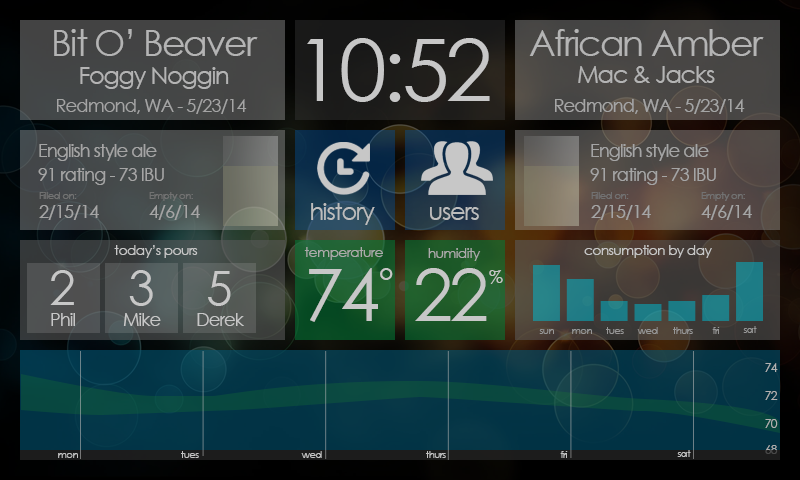
<style>
.page{position:relative;width:800px;height:480px}
.page>*{position:absolute;margin:0}
.t1{font:36px "CenturyGothic";letter-spacing:-0.05em;color:#bdbdbd}
.t2{font:86px "CenturyGothic";letter-spacing:-0.05em;color:#c7c7c7}
.t3{font:24px "CenturyGothic";letter-spacing:-0.05em;color:#bdbdbd}
.t4{font:18px "CenturyGothic";letter-spacing:-0.05em;color:#a4a4a4}
.t5{font:10px "CenturyGothic";letter-spacing:-0.05em;color:#727272}
.t6{font:14px "CenturyGothic";letter-spacing:-0.05em;color:#c7c7c7}
.t7{font:14px "CenturyGothic";letter-spacing:-0.05em;color:#ababab}
.t8{font:48px "CenturyGothic";letter-spacing:-0.05em;color:#c7c7c7}
.t9{font:72px "CenturyGothic";letter-spacing:-0.05em;color:#c7c7c7}
.t10{font:36px "CenturyGothic";letter-spacing:-0.05em;color:#c7c7c7}
.t11{font:18px "CenturyGothic";letter-spacing:-0.05em;color:#c7c7c7}
.t12{font:10px "CenturyGothic";letter-spacing:-0.05em;color:#969696}
.t13{font:12px "CenturyGothic";letter-spacing:-0.05em;color:#b1b1b1}
.t14{font:12px "CenturyGothic";letter-spacing:-0.05em}
.t15{font:10px "CenturyGothic";letter-spacing:-0.05em;color:#c3c3c3}
</style>
<div class="page">
<p class="t1" style="left:54px;top:29px;width:204px;height:27px">Bit O’ Beaver</p>
<p class="t1" style="left:529px;top:29px;width:235px;height:27px">African Amber</p>
<p class="t2" style="left:307px;top:38px;width:183px;height:64px">10:52</p>
<p class="t3" style="left:80px;top:67px;width:149px;height:22px">Foggy Noggin</p>
<p class="t3" style="left:578px;top:66px;width:137px;height:17px">Mac &amp; Jacks</p>
<p class="t4" style="left:57px;top:99px;width:190px;height:15px">Redmond, WA - 5/23/14</p>
<p class="t4" style="left:555px;top:99px;width:190px;height:15px">Redmond, WA - 5/23/14</p>
<p class="t4" style="left:39px;top:144px;width:118px;height:17px">English style ale</p>
<p class="t4" style="left:591px;top:144px;width:118px;height:17px">English style ale</p>
<p class="t4" style="left:38px;top:168px;width:126px;height:17px">91 rating - 73 IBU</p>
<p class="t4" style="left:590px;top:168px;width:126px;height:17px">91 rating - 73 IBU</p>
<p class="t5" style="left:39px;top:192px;width:38px;height:7px">Filled on:</p>
<p class="t5" style="left:149px;top:192px;width:44px;height:9px">Empty on:</p>
<p class="t5" style="left:591px;top:192px;width:38px;height:7px">Filled on:</p>
<p class="t5" style="left:701px;top:192px;width:44px;height:9px">Empty on:</p>
<p class="t4" style="left:39px;top:205px;width:60px;height:15px">2/15/14</p>
<p class="t4" style="left:149px;top:205px;width:51px;height:15px">4/6/14</p>
<p class="t3" style="left:311px;top:203px;width:64px;height:22px">history</p>
<p class="t3" style="left:430px;top:207px;width:49px;height:13px">users</p>
<p class="t4" style="left:591px;top:205px;width:60px;height:15px">2/15/14</p>
<p class="t4" style="left:701px;top:205px;width:51px;height:15px">4/6/14</p>
<p class="t6" style="left:114px;top:245px;width:84px;height:13px">today’s pours</p>
<p class="t6" style="left:584px;top:245px;width:128px;height:13px">consumption by day</p>
<p class="t7" style="left:304px;top:247px;width:79px;height:13px">temperature</p>
<p class="t7" style="left:428px;top:248px;width:53px;height:13px">humidity</p>
<p class="t8" style="left:50px;top:270px;width:24px;height:35px">2</p>
<p class="t8" style="left:129px;top:270px;width:24px;height:36px">3</p>
<p class="t9" style="left:309px;top:268px;width:69px;height:54px">74</p>
<p class="t10" style="left:380px;top:268px;width:13px;height:12px">°</p>
<p class="t9" style="left:415px;top:268px;width:72px;height:53px">22</p>
<p class="t11" style="left:489px;top:270px;width:14px;height:14px">%</p>
<p class="t8" style="left:208px;top:271px;width:23px;height:35px">5</p>
<p class="t11" style="left:51px;top:313px;width:24px;height:13px">Phil</p>
<p class="t11" style="left:123px;top:313px;width:38px;height:13px">Mike</p>
<p class="t11" style="left:197px;top:313px;width:47px;height:13px">Derek</p>
<p class="t12" style="left:539px;top:329px;width:15px;height:5px">sun</p>
<p class="t12" style="left:572px;top:329px;width:20px;height:5px">mon</p>
<p class="t12" style="left:606px;top:327px;width:18px;height:7px">tues</p>
<p class="t12" style="left:637px;top:327px;width:21px;height:7px">wed</p>
<p class="t12" style="left:673px;top:327px;width:20px;height:7px">thurs</p>
<p class="t12" style="left:712px;top:327px;width:8px;height:7px">fri</p>
<p class="t12" style="left:743px;top:326px;width:14px;height:7px">sat</p>
<p class="t13" style="left:765px;top:363px;width:13px;height:9px">74</p>
<p class="t13" style="left:765px;top:391px;width:13px;height:9px">72</p>
<p class="t13" style="left:765px;top:419px;width:13px;height:9px">70</p>
<p class="t14" style="left:765px;top:445px;width:13px;height:9px">68</p>
<p class="t15" style="left:58px;top:453px;width:20px;height:5px">mon</p>
<p class="t15" style="left:181px;top:451px;width:18px;height:7px">tues</p>
<p class="t15" style="left:301px;top:451px;width:21px;height:7px">wed</p>
<p class="t15" style="left:426px;top:451px;width:20px;height:7px">thurs</p>
<p class="t15" style="left:560px;top:451px;width:8px;height:7px">fri</p>
<p class="t15" style="left:677px;top:450px;width:14px;height:7px">sat</p>
</div>
